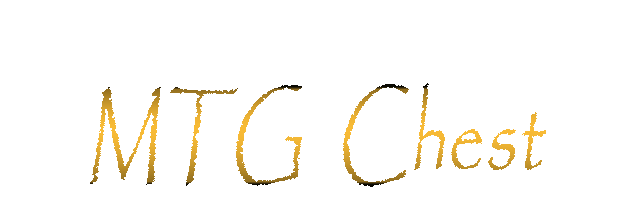
<style>
.page{position:relative;width:635px;height:202px;background:#ffffff}
.page>*{position:absolute;margin:0}
.t1{font:104.4px "Papyrus-Regular";letter-spacing:0.01em;font-style:italic;scale:0.69 1}
</style>
<div class="page">
<p class="t1" style="left:89px;top:83px;width:458px;height:104px">MTG  Chest</p>
</div>
